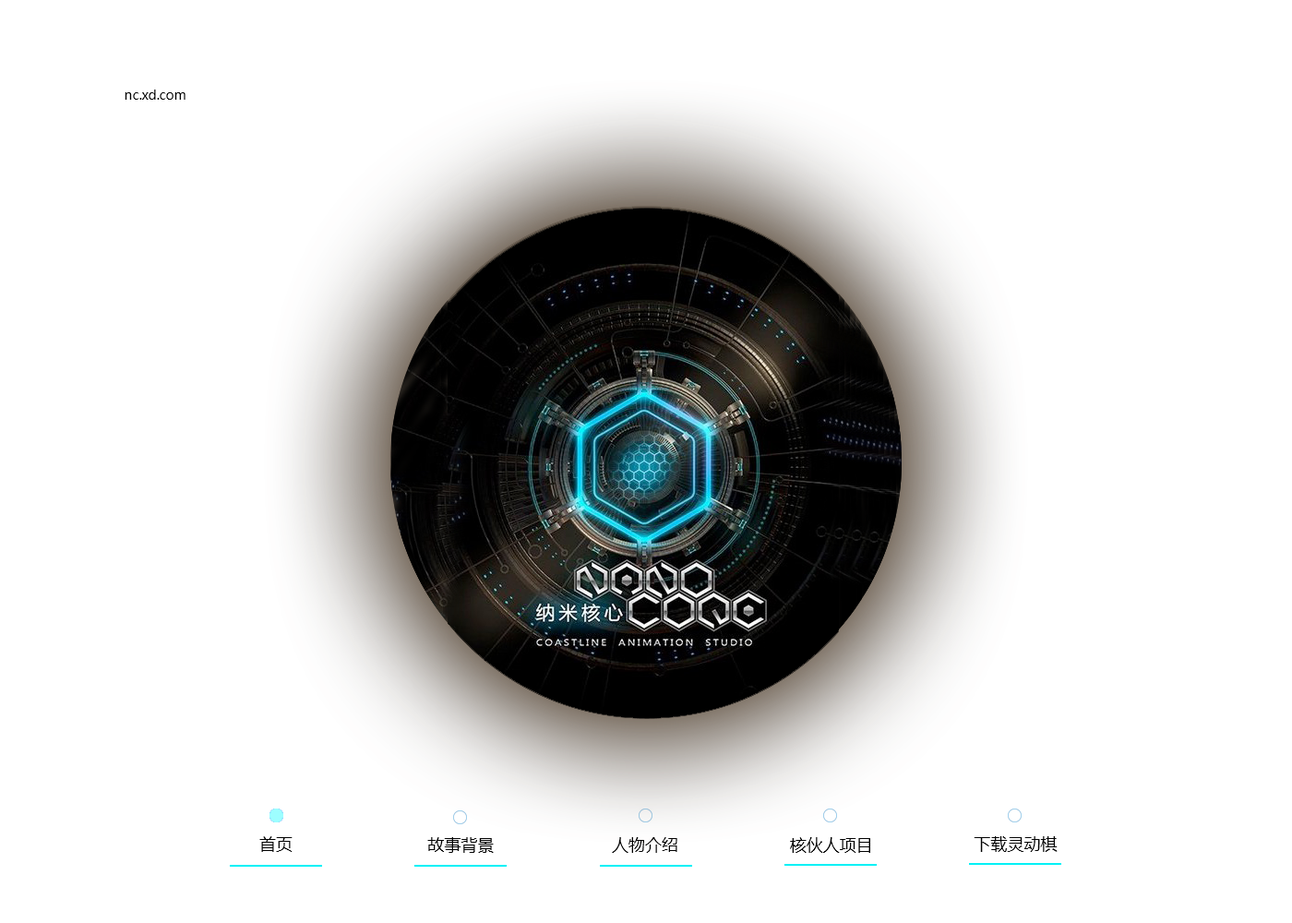
<style>
.page{position:relative;width:1292px;height:923px;background:#ffffff}
.page>*{position:absolute;margin:0}
.t1{font:12.9px "MicrosoftYaHei";color:#000000}
.t2{font:16.6px "MicrosoftYaHei";color:#000000}
.t3{font:16.6px "MicrosoftYaHei";color:#010101}
</style>
<div class="page">
<p class="t1" style="left:125px;top:90px;width:61px;height:10px">nc.xd.com</p>
<p class="t2" style="left:259px;top:836px;width:34px;height:16px">首页</p>
<p class="t2" style="left:427px;top:837px;width:67px;height:16px">故事背景</p>
<p class="t2" style="left:612px;top:837px;width:65px;height:16px">人物介绍</p>
<p class="t2" style="left:790px;top:837px;width:80px;height:16px">核伙人项目</p>
<p class="t3" style="left:974px;top:836px;width:84px;height:16px">下载灵动棋</p>
</div>
